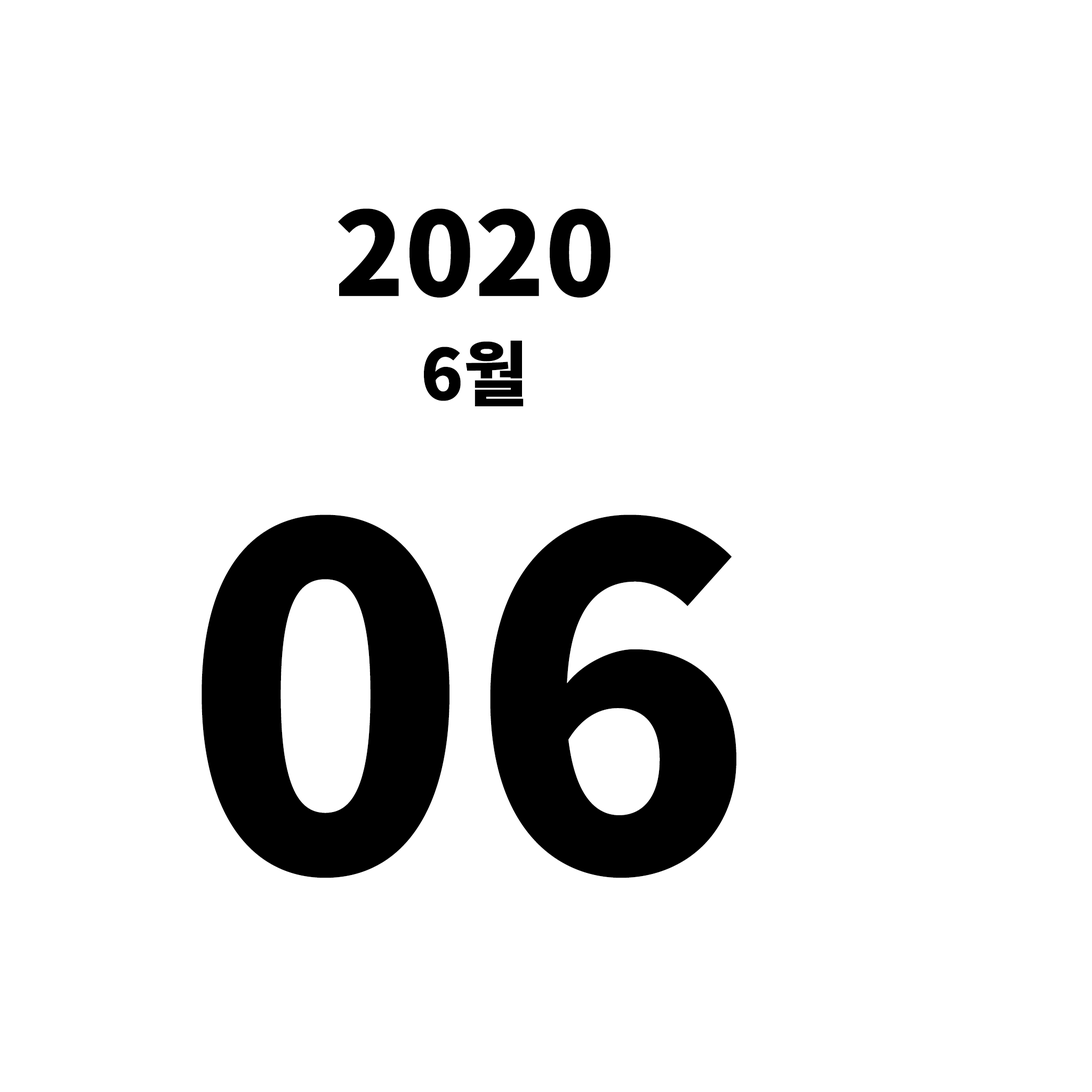
<style>
.page{position:relative;width:1092px;height:1092px;background:#ffffff}
.page>*{position:absolute;margin:0}
.t1{font:115.2px "NotoSansKR-Black";color:#000000}
.t2{font:70.1px "NotoSansKR-Black";color:#000000}
.t3{font:470.3px "NotoSansKR-Black";color:#000000}
</style>
<div class="page">
<p class="t1" style="left:338px;top:208px;width:273px;height:90px">2020</p>
<p class="t2" style="left:424px;top:340px;width:100px;height:66px">6월</p>
<p class="t3" style="left:202px;top:515px;width:534px;height:363px">06</p>
</div>
